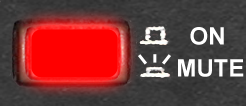
<style>
.page{position:relative;width:246px;height:106px}
.page>*{position:absolute;margin:0}
.t1{font:24px "Arial-BoldMT";color:#ffffff}
</style>
<div class="page">
<p class="t1" style="left:190px;top:27px;width:34px;height:18px">ON</p>
<p class="t1" style="left:178px;top:59px;width:66px;height:18px">MUTE</p>
</div>
